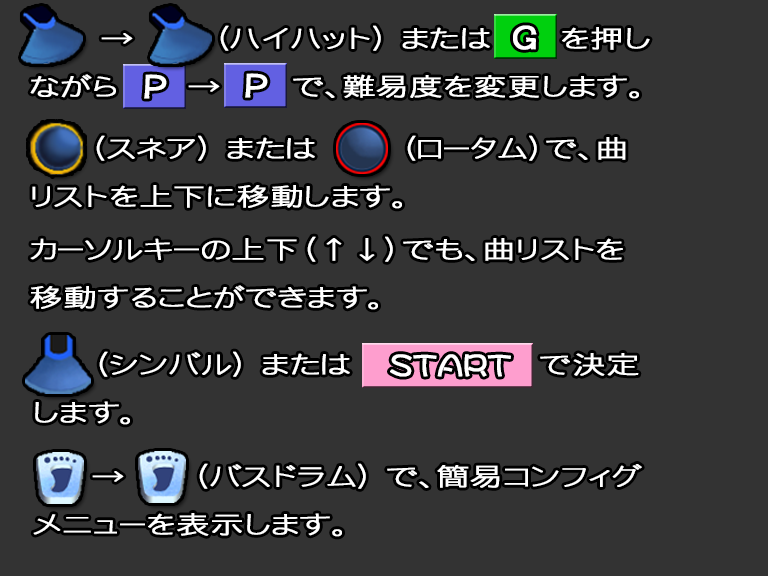
<style>
.page{position:relative;width:768px;height:576px;background:#333333}
.page>*{position:absolute;margin:0}
.t1{font:24.8px/48px "DFGothicP-W3-WING-RKSJ-H";color:#ffffff;font-weight:bold;scale:1.33 1}
.t2{font:30px "DFPOPClip-W7-WINP-RKSJ-H";color:#ffffff;font-weight:bold}
.t3{font:30px "DFMaruMojiSQ-W5-WINP-RKSJ-H";color:#ffffff;font-weight:bold}
</style>
<div class="page">
<p class="t1" style="left:30px;top:25px;width:620px;height:74px">→   （ハイハット） または　　　　を押し<br>ながら　　　　→      で、難易度を変更します。</p>
<p class="t2" style="left:513px;top:25px;width:24px;height:25px">G</p>
<p class="t2" style="left:144px;top:74px;width:23px;height:25px">P</p>
<p class="t2" style="left:245px;top:73px;width:23px;height:25px">P</p>
<p class="t1" style="left:32px;top:135px;width:594px;height:74px">（スネア） または       （ロータム）で、曲<br>リストを上下に移動します。</p>
<p class="t1" style="left:30px;top:236px;width:593px;height:74px">カーソルキーの上下（↑↓）でも、曲リストを<br>移動することができます。</p>
<p class="t1" style="left:35px;top:351px;width:604px;height:74px">（シンバル） または       で決定<br>します。</p>
<p class="t3" style="left:390px;top:354px;width:121px;height:23px">START</p>
<p class="t1" style="left:33px;top:463px;width:609px;height:74px">→  （バスドラム） で、簡易コンフィグ<br>メニューを表示します。</p>
</div>
